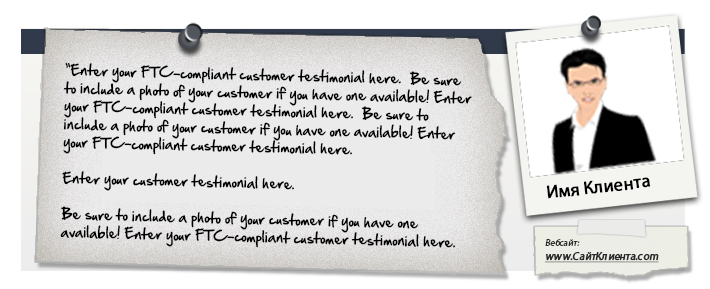
<style>
.page{position:relative;width:710px;height:289px;background:#ffffff}
.page>*{position:absolute;margin:0}
.t1{font:13px/18px "HandOfSean";letter-spacing:0.01em;color:#000000}
.t2{font:18px "MyriadPro-Regular";color:#000000;font-weight:bold}
.t3{font:11.5px "MyriadPro-Regular";color:#2c2b2b;font-weight:bold;font-style:italic;text-decoration:underline;scale:0.94 1}
.t4{font:9.8px "MyriadPro-Regular";color:#2c2b2b;font-style:italic;scale:0.94 1}
</style>
<div class="page">
<p class="t1" style="left:60px;top:62px;width:412px;height:186px;rotate:1deg">“Enter your FTC-compliant customer testimonial here.  Be sure to include a photo of your customer if you have one available! Enter your FTC-compliant customer testimonial here.  Be sure to include a photo of your customer if you have one available! Enter your FTC-compliant customer testimonial here.  <br><br>Enter your customer testimonial here.  <br><br>Be sure to include a photo of your customer if you have one available! Enter your FTC-compliant customer testimonial here.</p>
<p class="t2" style="left:546px;top:177px;width:105px;height:22px;rotate:-7deg">Имя Клиента</p>
<p class="t3" style="left:545px;top:239px;width:114px;height:24px"><span class="t4">Вебсайт:<br></span>www.СайтКлиента.com</p>
</div>
